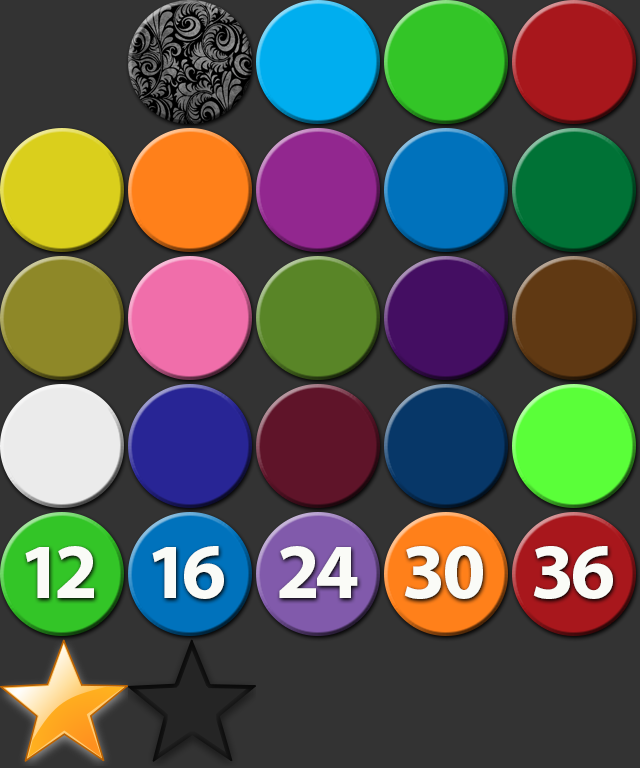
<style>
.page{position:relative;width:640px;height:768px;background:#333333}
.page>*{position:absolute;margin:0}
.t1{font:59.1px "MyriadPro-Bold";letter-spacing:-0.04em;color:#fafbf7}
</style>
<div class="page">
<p class="t1" style="left:25px;top:546px;width:69px;height:52px">12</p>
<p class="t1" style="left:152px;top:546px;width:72px;height:53px">16</p>
<p class="t1" style="left:279px;top:546px;width:79px;height:52px">24</p>
<p class="t1" style="left:404px;top:546px;width:79px;height:53px">30</p>
<p class="t1" style="left:533px;top:546px;width:80px;height:53px">36</p>
</div>
